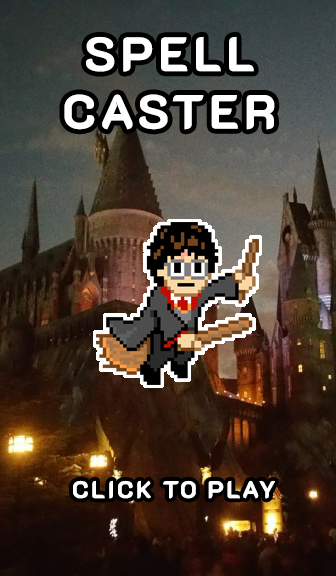
<style>
.page{position:relative;width:336px;height:576px}
.page>*{position:absolute;margin:0}
.t1{font:48px "K2D-ExtraBold";letter-spacing:0.1em;color:#ffffff;text-transform:uppercase}
.t2{font:24px "K2D-ExtraBold";letter-spacing:0.1em;color:#ffffff;text-transform:uppercase}
</style>
<div class="page">
<p class="t1" style="left:64px;top:36px;width:211px;height:94px;text-align:center">SPELL CASTER</p>
<p class="t2" style="left:73px;top:480px;width:202px;height:19px">click to play</p>
</div>
